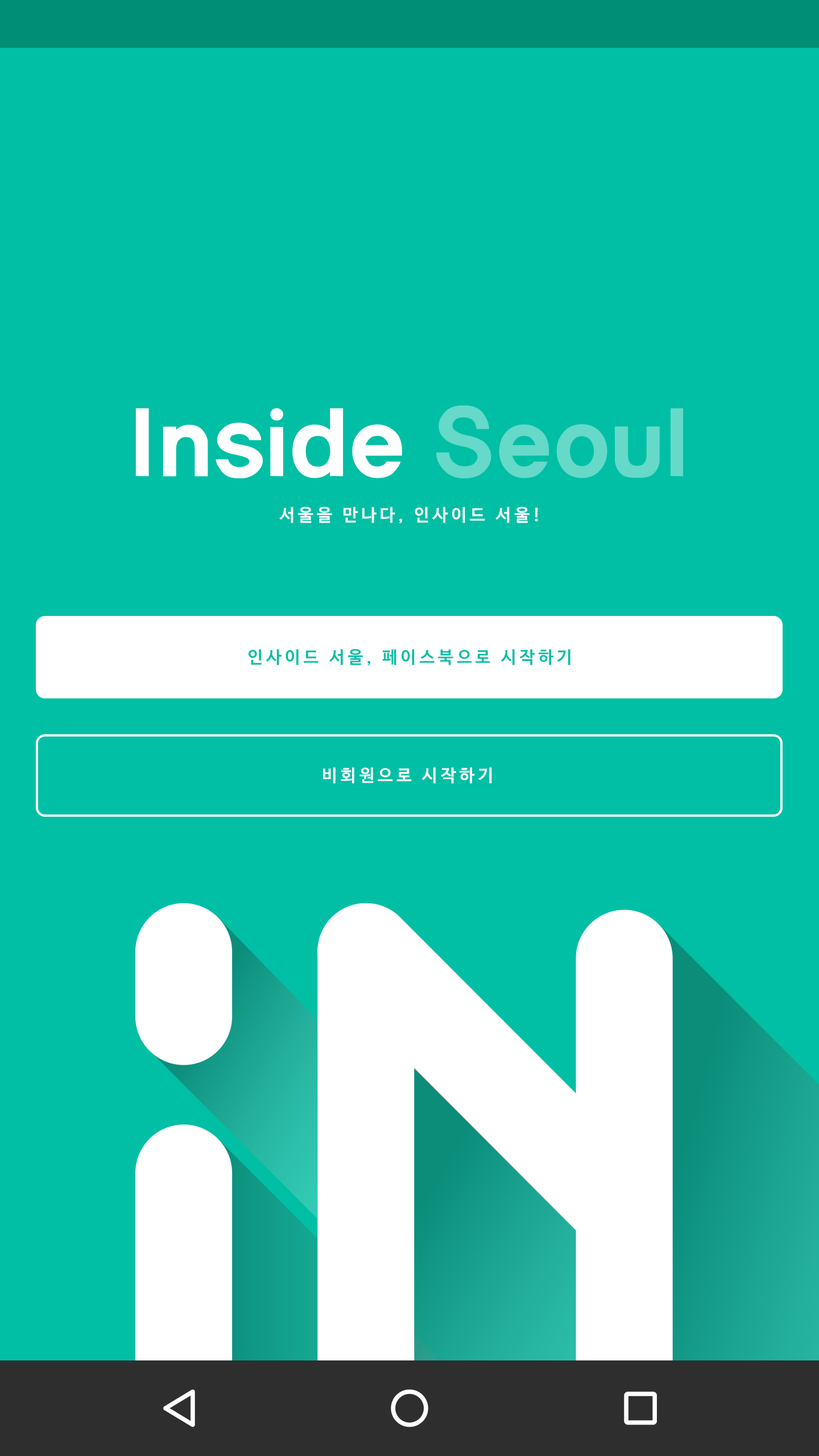
<style>
.page{position:relative;width:819px;height:1456px;background:#00bfa5}
.page>*{position:absolute;margin:0}
.t1{font:17.1px "NanumBarunGothicBold";letter-spacing:0.2em;color:#ffffff}
.t2{font:17.1px "NanumBarunGothicBold";letter-spacing:0.2em;color:#00bfa5}
</style>
<div class="page">
<p class="t1" style="left:279px;top:507px;width:259px;height:16px">서울을 만나다, 인사이드 서울!</p>
<p class="t2" style="left:249px;top:649px;width:321px;height:16px">인사이드 서울, 페이스북으로 시작하기</p>
<p class="t1" style="left:323px;top:767px;width:169px;height:17px">비회원으로 시작하기</p>
</div>
